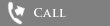
<style>
.page{position:relative;width:110px;height:26px;background:#808080}
.page>*{position:absolute;margin:0}
.t1{font:12px "TrajanPro-Bold";color:#ffffff;scale:1.05 1}
</style>
<div class="page">
<p class="t1" style="left:34px;top:8px;width:32px;height:9px">Call</p>
</div>
